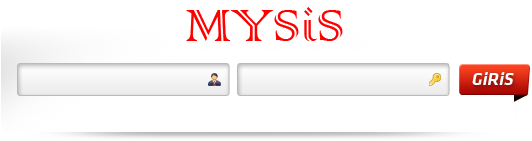
<style>
.page{position:relative;width:532px;height:141px;background:#ffffff}
.page>*{position:absolute;margin:0}
.t1{font:60px "ColonnaMT";color:#fe0000}
</style>
<div class="page">
<p class="t1" style="left:186px;top:7px;width:157px;height:34px">MYSiS</p>
</div>
